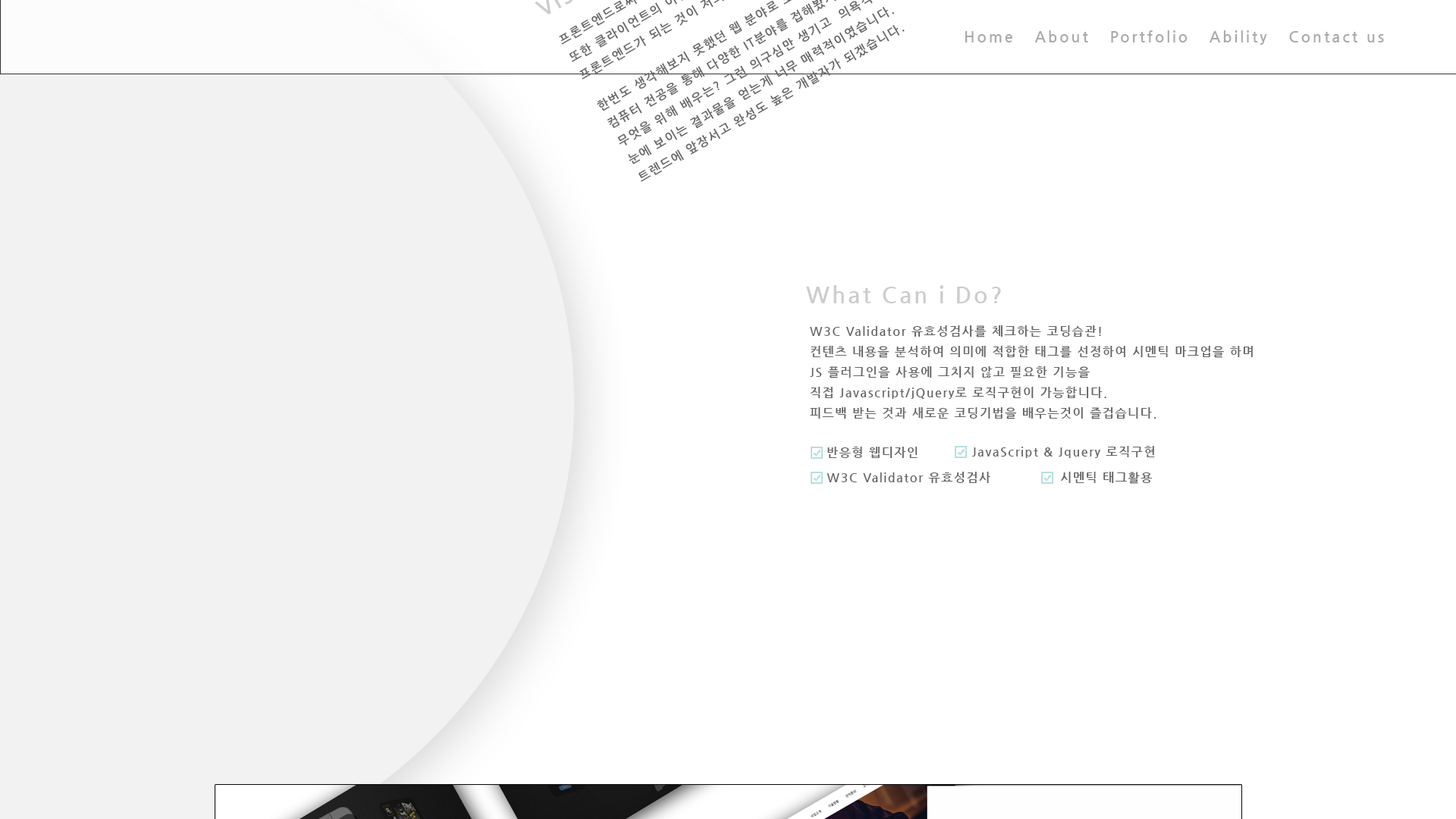
<style>
.page{position:relative;width:1456px;height:819px;background:#ffffff}
.page>*{position:absolute;margin:0}
.t1{font:15.2px "NanumGothicBold";letter-spacing:0.15em;color:#aaaaaa}
.t2{font:22.7px "NanumGothicBold";letter-spacing:0.1em;color:#cccccc}
.t3{font:12.1px/20.5px "NanumGothicBold";letter-spacing:0.1em;color:#666666}
.t4{font:12.1px "NanumGothicBold";letter-spacing:0.1em;color:#666666}
</style>
<div class="page">
<p class="t1" style="left:965px;top:30px;width:419px;height:15px">Home   About   Portfolio   Ability   Contact us</p>
<p class="t2" style="left:806px;top:285px;width:195px;height:18px">What Can i Do?</p>
<p class="t3" style="left:810px;top:325px;width:443px;height:94px">W3C Validator 유효성검사를 체크하는 코딩습관!<br>컨텐츠 내용을 분석하여 의미에 적합한 태그를 선정하여 시멘틱 마크업을 하며<br>JS 플러그인을 사용에 그치지 않고 필요한 기능을<br>직접 Javascript/jQuery로 로직구현이 가능합니다.<br>피드백 받는 것과 새로운 코딩기법을 배우는것이 즐겁습니다.</p>
<p class="t4" style="left:827px;top:447px;width:91px;height:11px">반응형 웹디자인</p>
<p class="t4" style="left:972px;top:446px;width:183px;height:12px">JavaScript &amp; Jquery 로직구현</p>
<p class="t4" style="left:827px;top:472px;width:163px;height:11px">W3C Validator 유효성검사</p>
<p class="t4" style="left:1061px;top:472px;width:92px;height:12px">시멘틱 태그활용</p>
</div>
